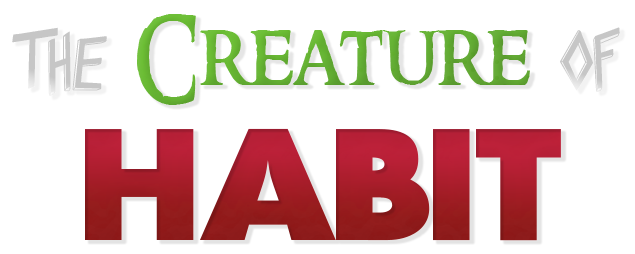
<style>
.page{position:relative;width:635px;height:254px;background:#ffffff}
.page>*{position:absolute;margin:0}
.t1{font:87px "RingbearerMedium";color:#5ca52b}
.t2{font:71px "Slaytanic";color:#c6c6c6}
.t3{font:154px "ScreamReal";color:#921919}
</style>
<div class="page">
<p class="t1" style="left:137px;top:14px;width:393px;height:91px">Creature</p>
<p class="t2" style="left:12px;top:27px;width:95px;height:69px">The</p>
<p class="t2" style="left:560px;top:27px;width:60px;height:65px">of</p>
<p class="t3" style="left:85px;top:128px;width:476px;height:113px">HABIT</p>
</div>
